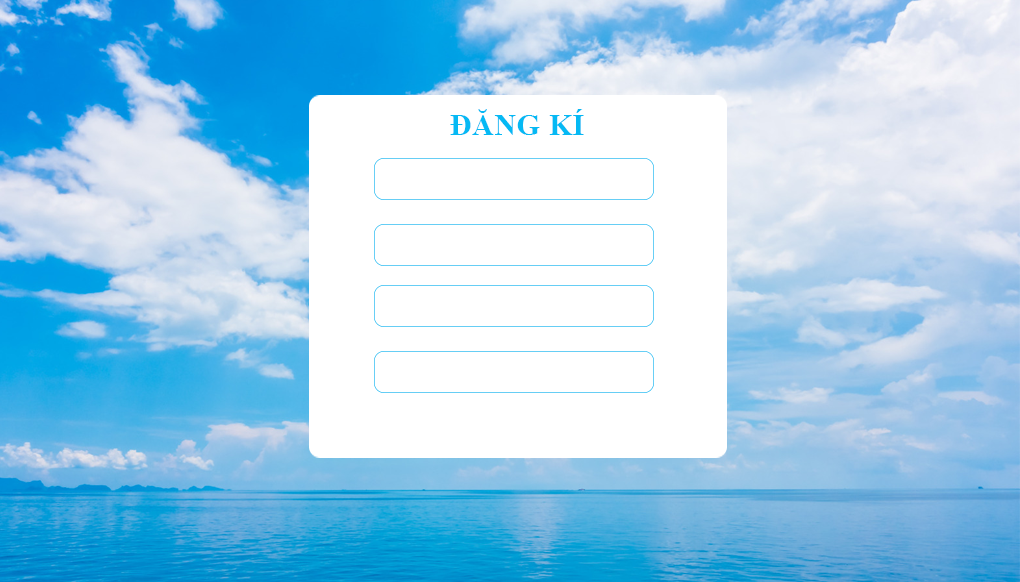
<style>
.page{position:relative;width:1020px;height:582px;background:#ffffff}
.page>*{position:absolute;margin:0}
.t1{font:30px "TimesNewRomanPS-BoldMT";letter-spacing:0.02em;color:#05b9f4;text-transform:uppercase}
</style>
<div class="page">
<p class="t1" style="left:450px;top:109px;width:134px;height:26px">Đăng Kí</p>
</div>
